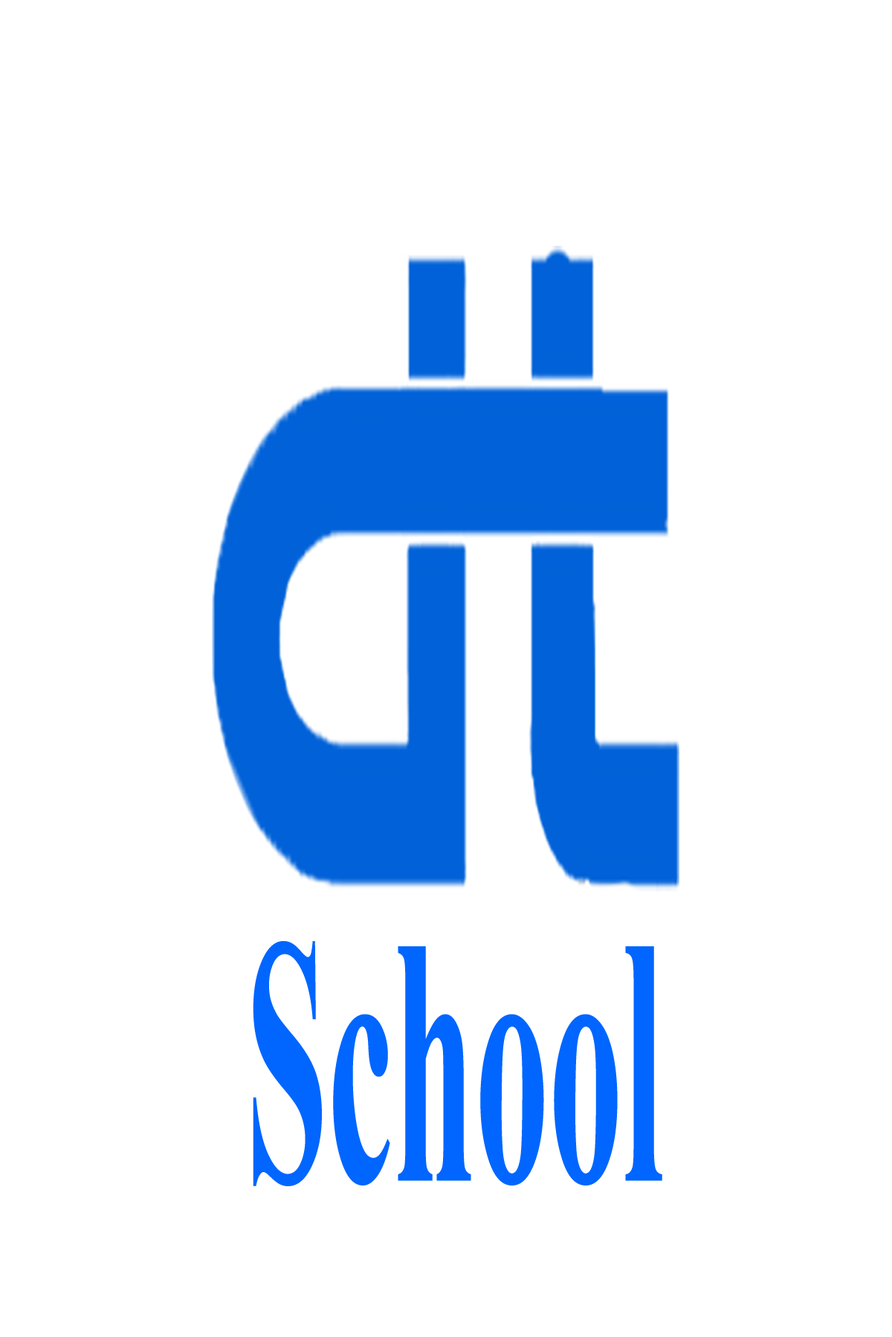
<style>
.page{position:relative;width:892px;height:1337px;background:#ffffff}
.page>*{position:absolute;margin:0}
.t1{font:353.7px "TimesNewRomanPS-BoldMT";color:#0066ff;scale:0.42 1}
</style>
<div class="page">
<p class="t1" style="left:253px;top:941px;width:409px;height:246px">School</p>
</div>
